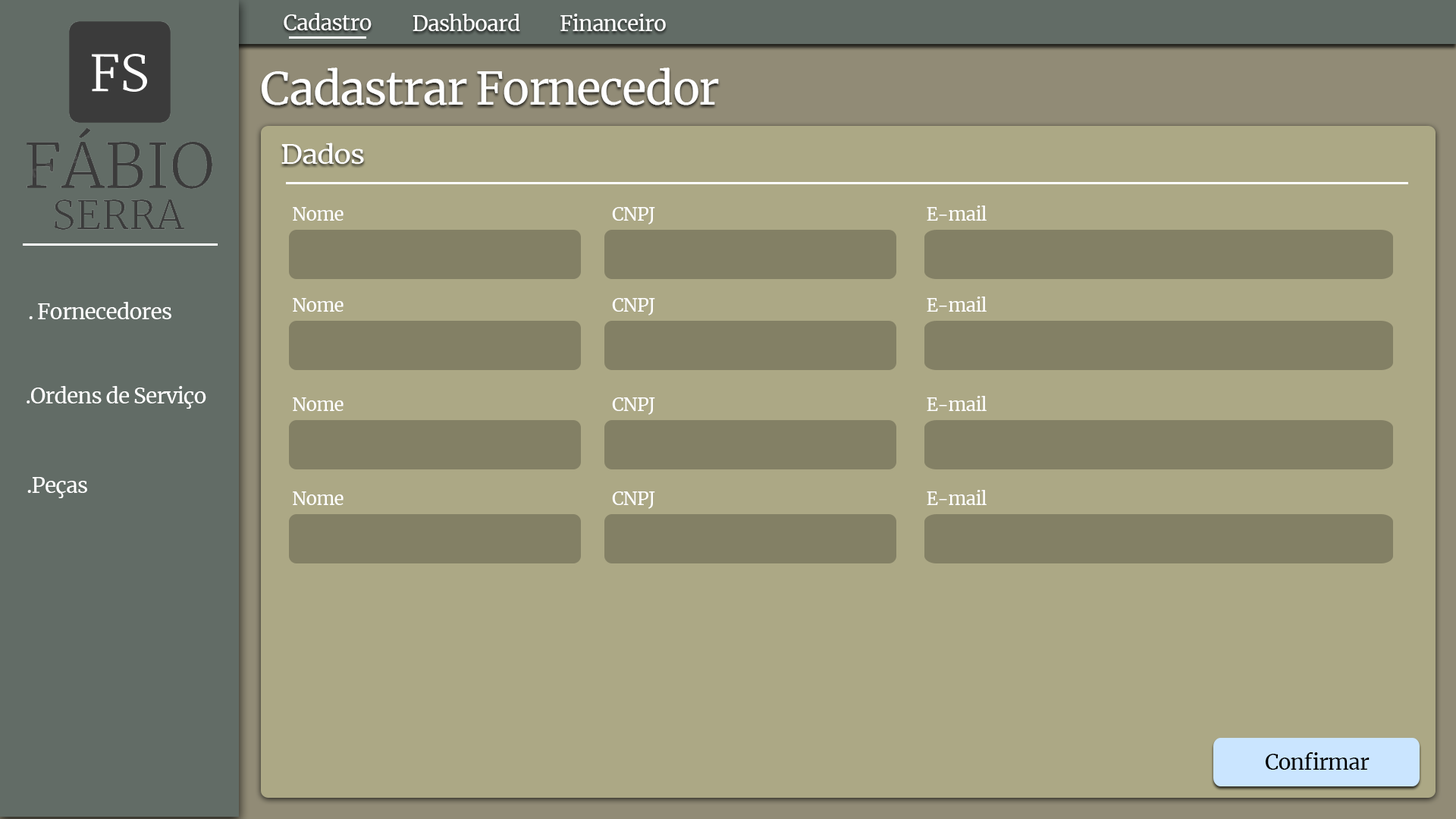
<style>
.page{position:relative;width:1456px;height:819px;background:#aca885}
.page>*{position:absolute;margin:0}
.t1{font:21.2px "Merriweather-Regular";letter-spacing:-0.03em;color:#ffffff}
.t2{font:45.5px "Merriweather-Regular";letter-spacing:-0.03em;color:#ffffff}
.t3{font:25.9px "Merriweather-Regular";letter-spacing:-0.03em;color:#ffffff;scale:1.11 1}
.t4{font:18.2px "Merriweather-Regular";letter-spacing:-0.03em;color:#ffffff}
.t5{font:21.2px "Merriweather-Regular";letter-spacing:-0.03em;color:#000000}
</style>
<div class="page">
<p class="t1" style="left:284px;top:13px;width:88px;height:17px">Cadastro</p>
<p class="t1" style="left:413px;top:14px;width:107px;height:17px">Dashboard</p>
<p class="t1" style="left:560px;top:14px;width:106px;height:17px">Financeiro</p>
<p class="t2" style="left:262px;top:67px;width:457px;height:38px">Cadastrar Fornecedor</p>
<p class="t3" style="left:281px;top:143px;width:83px;height:21px">Dados</p>
<p class="t4" style="left:293px;top:207px;width:51px;height:14px">Nome</p>
<p class="t4" style="left:612px;top:207px;width:43px;height:17px">CNPJ</p>
<p class="t4" style="left:927px;top:206px;width:60px;height:15px">E-mail</p>
<p class="t1" style="left:29px;top:302px;width:142px;height:17px">. Fornecedores</p>
<p class="t4" style="left:293px;top:298px;width:51px;height:14px">Nome</p>
<p class="t4" style="left:612px;top:298px;width:43px;height:17px">CNPJ</p>
<p class="t4" style="left:927px;top:297px;width:60px;height:15px">E-mail</p>
<p class="t1" style="left:27px;top:386px;width:179px;height:23px">.Ordens de Serviço</p>
<p class="t4" style="left:293px;top:397px;width:51px;height:14px">Nome</p>
<p class="t4" style="left:612px;top:397px;width:43px;height:18px">CNPJ</p>
<p class="t4" style="left:927px;top:396px;width:60px;height:15px">E-mail</p>
<p class="t1" style="left:27px;top:477px;width:60px;height:21px">.Peças</p>
<p class="t4" style="left:293px;top:491px;width:51px;height:14px">Nome</p>
<p class="t4" style="left:612px;top:491px;width:43px;height:18px">CNPJ</p>
<p class="t4" style="left:927px;top:490px;width:60px;height:15px">E-mail</p>
<p class="t5" style="left:1265px;top:752px;width:105px;height:18px">Confirmar</p>
</div>
